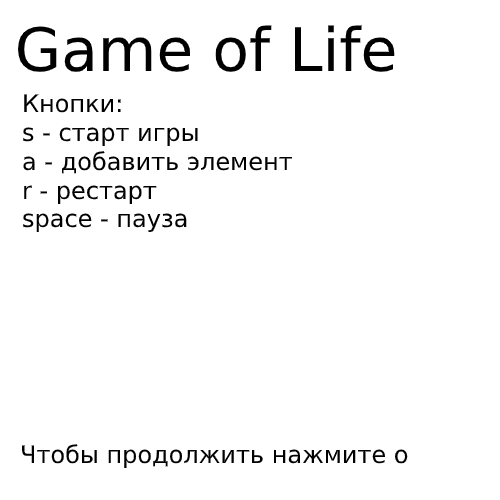
<style>
.page{position:relative;width:500px;height:500px;background:#ffffff}
.page>*{position:absolute;margin:0}
.t1{font:60px "DejaVuSans";color:#000000}
.t2{font:24px "DejaVuSans";color:#000000}
</style>
<div class="page">
<p class="t1" style="left:18px;top:25px;width:377px;height:47px">Game of Life</p>
<p class="t2" style="left:23px;top:94px;width:270px;height:138px">Кнопки:<br>s - старт игры<br>a - добавить элемент<br>r - рестарт<br>space - пауза</p>
<p class="t2" style="left:22px;top:444px;width:386px;height:24px">Чтобы продолжить нажмите o</p>
</div>
